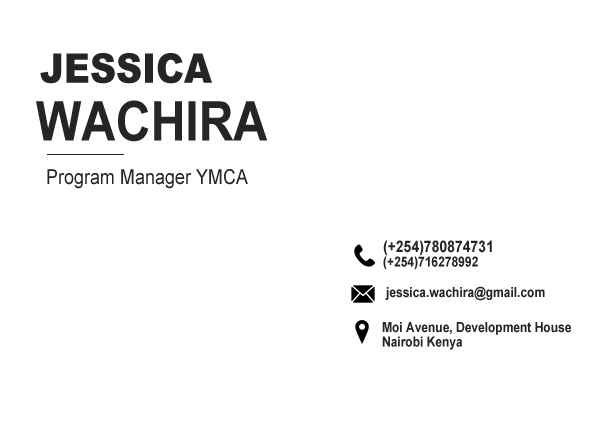
<style>
.page{position:relative;width:600px;height:430px;background:#ffffff}
.page>*{position:absolute;margin:0}
.t1{font:41px "Arial-Black";color:#252525;scale:0.88 1}
.t2{font:54.7px "Arial-BoldMT";color:#252525;scale:0.88 1}
.t3{font:20.5px "ArialMT";color:#252525;scale:0.88 1}
.t4{font:16px "Arial-BoldMT";color:#252525;scale:0.88 1}
.t5{font:13.7px "Arial-BoldMT";color:#252525;scale:0.88 1}
</style>
<div class="page">
<p class="t1" style="left:36px;top:53px;width:232px;height:89px">JESSICA<br>  <span class="t2">WACHIRA</span></p>
<p class="t3" style="left:47px;top:169px;width:201px;height:20px">Program Manager YMCA</p>
<p class="t4" style="left:383px;top:240px;width:109px;height:30px">(+254)780874731<br><span class="t5">(+254)716278992</span></p>
<p class="t5" style="left:385px;top:286px;width:160px;height:15px">jessica.wachira@gmail.com</p>
<p class="t5" style="left:382px;top:322px;width:189px;height:28px">Moi Avenue, Development House<br>Nairobi Kenya</p>
</div>
